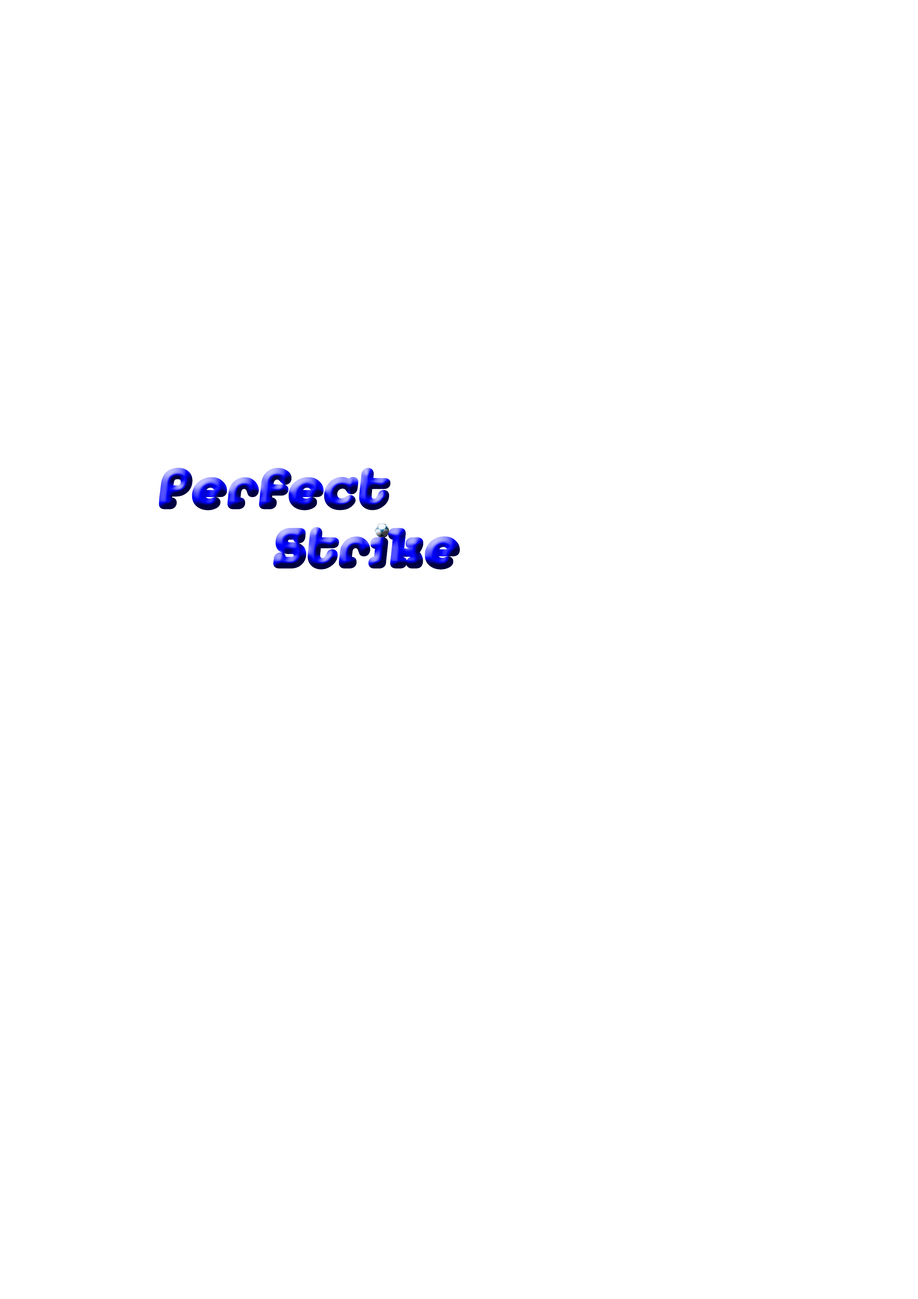
<style>
.page{position:relative;width:918px;height:1299px;background:#ffffff}
.page>*{position:absolute;margin:0}
.t1{font:55.5px "JanisNormal";font-weight:bold}
</style>
<div class="page">
<p class="t1" style="left:159px;top:468px;width:232px;height:42px">Perfect</p>
<p class="t1" style="left:273px;top:525px;width:187px;height:44px">Strike</p>
</div>
